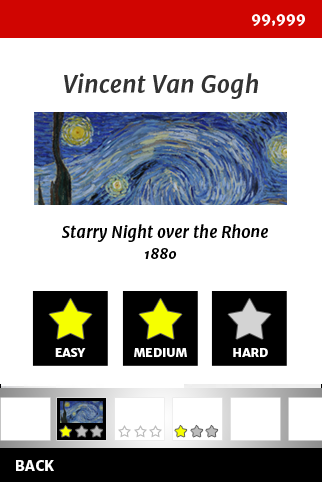
<style>
.page{position:relative;width:322px;height:482px;background:#ffffff}
.page>*{position:absolute;margin:0}
.t1{font:14px "MerriweatherSans-ExtraBold";color:#ffffff}
.t2{font:24px "MerriweatherSans-BoldItalic";color:#333333}
.t3{font:16px "MerriweatherSans-BoldItalic";color:#000000}
.t4{font:16px "MerriweatherSans-BoldItalic";color:#ffffff}
.t5{font:14px "MerriweatherSans-BoldItalic";color:#000000}
.t6{font:12px "MerriweatherSans-ExtraBold";color:#ffffff}
</style>
<div class="page">
<p class="t1" style="left:252px;top:14px;width:53px;height:12px">99,999</p>
<p class="t2" style="left:64px;top:73px;width:194px;height:26px">Vincent Van Gogh</p>
<p class="t3" style="left:53px;top:224px;width:215px;height:18px"><span class="t4">S</span>Starry Night over the Rhone</p>
<p class="t5" style="left:144px;top:248px;width:33px;height:11px">1880</p>
<p class="t6" style="left:55px;top:348px;width:31px;height:9px">EASY</p>
<p class="t6" style="left:134px;top:348px;width:53px;height:10px">MEDIUM</p>
<p class="t6" style="left:233px;top:348px;width:35px;height:10px">HARD</p>
<p class="t1" style="left:16px;top:460px;width:38px;height:11px">BACK</p>
</div>
